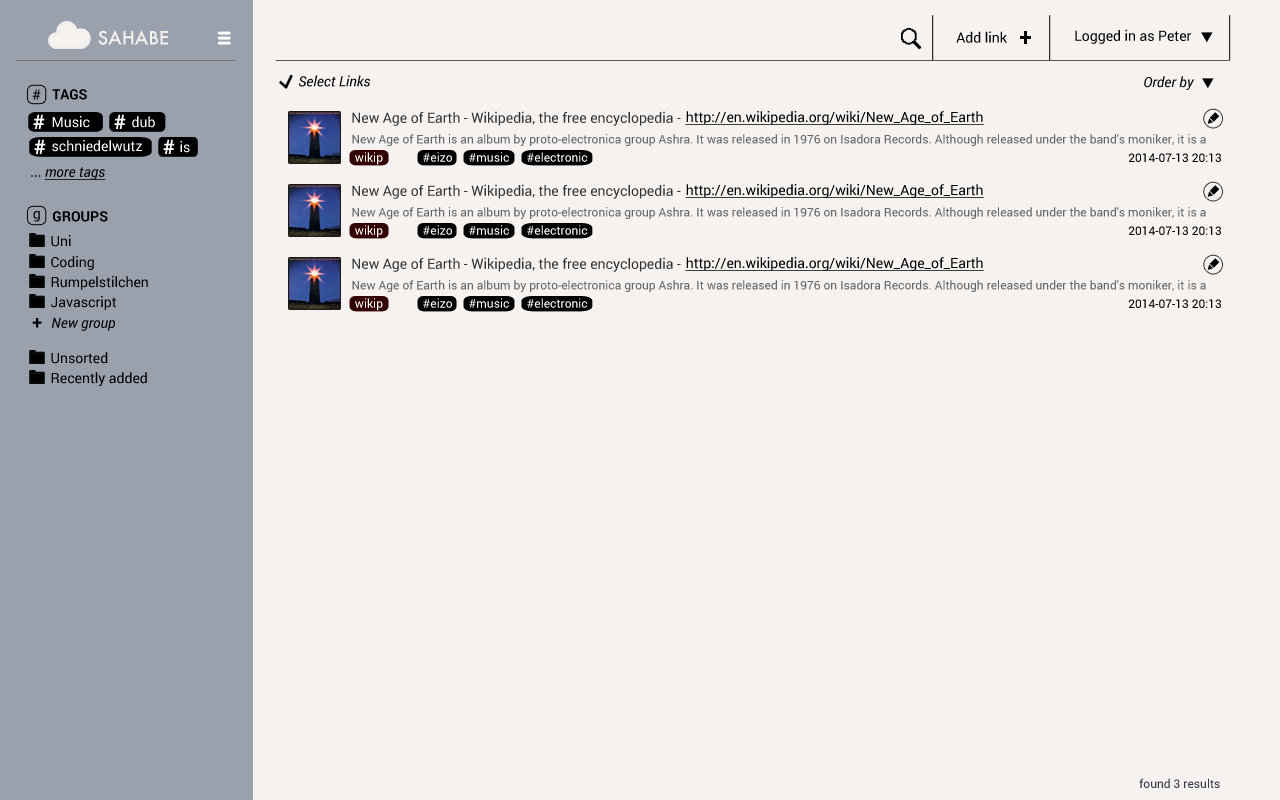
<style>
.page{position:relative;width:1280px;height:800px;background:#f5f2f0}
.page>*{position:absolute;margin:0}
.t1{font:18px "Futura-Medium";color:#f5f2f0}
.t2{font:14px "Roboto-Regular";color:#000000}
.t3{font:24px "Roboto-Bold";color:#000000}
.t4{font:14px "Roboto-Italic";color:#000000}
.t5{font:14px "Roboto-Bold";color:#000000}
.t6{font:14px "Roboto-Regular";color:#333333}
.t7{font:14px "Roboto-Regular";color:#000000;text-decoration:underline}
.t8{font:20px "Roboto-Bold";color:#ffffff}
.t9{font:14px "Roboto-Regular";color:#ffffff}
.t10{font:12px "Roboto-Regular";color:#666666}
.t11{font:12px "Roboto-Regular";color:#ffffff}
.t12{font:12px "Roboto-Regular";color:#000000}
.t13{font:14px "Roboto-Italic";color:#000000;text-decoration:underline}
.t14{font:14px "Roboto-Regular";color:#010101}
.t15{font:18px "Roboto-Bold";color:#000000}
.t16{font:12px "Roboto-Regular";color:#383846}
</style>
<div class="page">
<p class="t1" style="left:98px;top:30px;width:70px;height:15px">SAHABE</p>
<p class="t2" style="left:1075px;top:29px;width:117px;height:15px">Logged in as Peter</p>
<p class="t2" style="left:956px;top:31px;width:51px;height:12px">Add link</p>
<p class="t3" style="left:1020px;top:31px;width:11px;height:13px">+</p>
<p class="t4" style="left:299px;top:75px;width:71px;height:12px">Select Links</p>
<p class="t4" style="left:1144px;top:76px;width:50px;height:14px">Order by</p>
<p class="t2" style="left:32px;top:89px;width:9px;height:11px">#</p>
<p class="t5" style="left:52px;top:89px;width:35px;height:11px">TAGS</p>
<p class="t6" style="left:352px;top:111px;width:329px;height:15px">New Age of Earth - Wikipedia, the free encyclopedia -</p>
<p class="t7" style="left:685px;top:111px;width:299px;height:14px">http://en.wikipedia.org/wiki/New_Age_of_Earth</p>
<p class="t8" style="left:33px;top:114px;width:12px;height:15px">#</p>
<p class="t9" style="left:52px;top:116px;width:38px;height:12px">Music</p>
<p class="t8" style="left:114px;top:114px;width:12px;height:15px">#</p>
<p class="t9" style="left:132px;top:116px;width:23px;height:12px">dub</p>
<p class="t10" style="left:352px;top:134px;width:854px;height:12px">New Age of Earth is an album by proto-electronica group Ashra. It was released in 1976 on Isadora Records. Although released under the band's moniker, it is a solo album by Ashra member Manuel Göttsching.</p>
<p class="t8" style="left:34px;top:139px;width:12px;height:15px">#</p>
<p class="t9" style="left:52px;top:140px;width:90px;height:12px">schniedelwutz</p>
<p class="t8" style="left:163px;top:139px;width:12px;height:15px">#</p>
<p class="t9" style="left:180px;top:141px;width:10px;height:12px">is</p>
<p class="t11" style="left:355px;top:152px;width:28px;height:13px">wikip</p>
<p class="t11" style="left:423px;top:152px;width:29px;height:10px">#eizo</p>
<p class="t11" style="left:469px;top:152px;width:40px;height:10px">#music</p>
<p class="t11" style="left:527px;top:152px;width:61px;height:10px">#electronic</p>
<p class="t12" style="left:1128px;top:153px;width:93px;height:9px">2014-07-13 20:13</p>
<p class="t13" style="left:31px;top:167px;width:75px;height:13px"><span class="t2">... </span>more tags</p>
<p class="t6" style="left:352px;top:184px;width:329px;height:15px">New Age of Earth - Wikipedia, the free encyclopedia -</p>
<p class="t7" style="left:685px;top:184px;width:299px;height:14px">http://en.wikipedia.org/wiki/New_Age_of_Earth</p>
<p class="t10" style="left:352px;top:207px;width:854px;height:12px">New Age of Earth is an album by proto-electronica group Ashra. It was released in 1976 on Isadora Records. Although released under the band's moniker, it is a solo album by Ashra member Manuel Göttsching.</p>
<p class="t2" style="left:33px;top:211px;width:7px;height:11px">g</p>
<p class="t5" style="left:53px;top:211px;width:55px;height:11px">GROUPS</p>
<p class="t11" style="left:355px;top:225px;width:28px;height:13px">wikip</p>
<p class="t11" style="left:423px;top:225px;width:29px;height:10px">#eizo</p>
<p class="t11" style="left:469px;top:225px;width:40px;height:10px">#music</p>
<p class="t11" style="left:527px;top:225px;width:61px;height:10px">#electronic</p>
<p class="t12" style="left:1128px;top:226px;width:93px;height:9px">2014-07-13 20:13</p>
<p class="t2" style="left:51px;top:235px;width:20px;height:12px">Uni</p>
<p class="t14" style="left:51px;top:256px;width:43px;height:14px">Coding</p>
<p class="t6" style="left:352px;top:257px;width:329px;height:15px">New Age of Earth - Wikipedia, the free encyclopedia -</p>
<p class="t7" style="left:685px;top:257px;width:299px;height:14px">http://en.wikipedia.org/wiki/New_Age_of_Earth</p>
<p class="t2" style="left:51px;top:276px;width:97px;height:14px">Rumpelstilchen</p>
<p class="t10" style="left:352px;top:280px;width:854px;height:12px">New Age of Earth is an album by proto-electronica group Ashra. It was released in 1976 on Isadora Records. Although released under the band's moniker, it is a solo album by Ashra member Manuel Göttsching.</p>
<p class="t2" style="left:51px;top:296px;width:65px;height:14px">Javascript</p>
<p class="t11" style="left:355px;top:298px;width:28px;height:13px">wikip</p>
<p class="t11" style="left:423px;top:298px;width:29px;height:10px">#eizo</p>
<p class="t11" style="left:469px;top:298px;width:40px;height:10px">#music</p>
<p class="t11" style="left:527px;top:298px;width:61px;height:10px">#electronic</p>
<p class="t12" style="left:1128px;top:299px;width:93px;height:9px">2014-07-13 20:13</p>
<p class="t15" style="left:32px;top:318px;width:10px;height:10px">+</p>
<p class="t4" style="left:51px;top:317px;width:64px;height:14px">New group</p>
<p class="t2" style="left:51px;top:352px;width:57px;height:12px">Unsorted</p>
<p class="t2" style="left:51px;top:372px;width:96px;height:14px">Recently added</p>
<p class="t16" style="left:1139px;top:778px;width:81px;height:10px">found 3 results</p>
</div>
